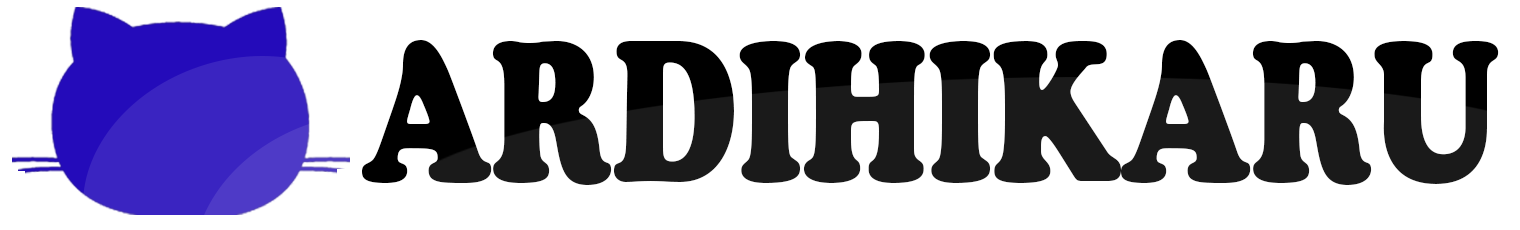
<style>
.page{position:relative;width:1520px;height:230px;background:#ffffff}
.page>*{position:absolute;margin:0}
.t1{font:197.3px "CooperBlackStd";scale:0.75 1}
</style>
<div class="page">
<p class="t1" style="left:361px;top:40px;width:1138px;height:145px">ARDIHIKARU</p>
</div>
